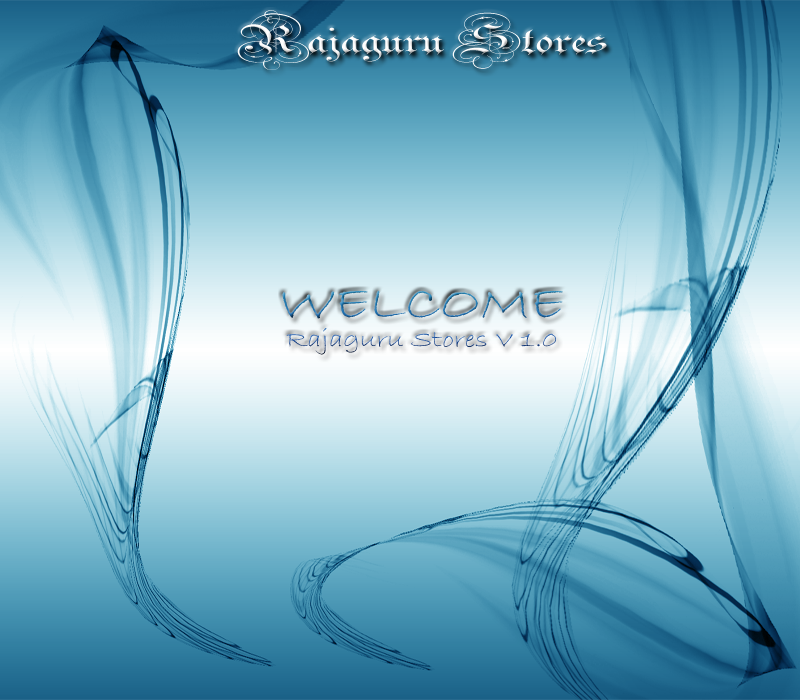
<style>
.page{position:relative;width:800px;height:700px}
.page>*{position:absolute;margin:0}
.t1{font:65.3px "Parchment-Regular";color:#fefefe;scale:1.47 1}
.t2{font:24.3px "BradleyHandITC";scale:1.19 1}
.t3{font:48.6px "BradleyHandITC";scale:1.19 1}
</style>
<div class="page">
<p class="t1" style="left:237px;top:10px;width:370px;height:60px">Rajaguru Stores</p>
<p class="t2" style="left:282px;top:290px;width:281px;height:65px;text-align:center"><span class="t3">WELCOME<br></span>Rajaguru Stores V 1.0</p>
</div>
